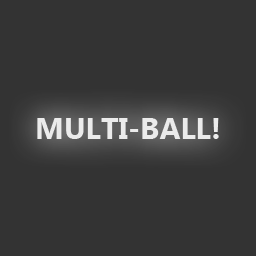
<style>
.page{position:relative;width:256px;height:256px;background:#333333}
.page>*{position:absolute;margin:0}
.t1{font:30px "MicrosoftTaiLe-Bold";color:#ebebeb}
</style>
<div class="page">
<p class="t1" style="left:37px;top:118px;width:182px;height:21px">MULTI-BALL!</p>
</div>
